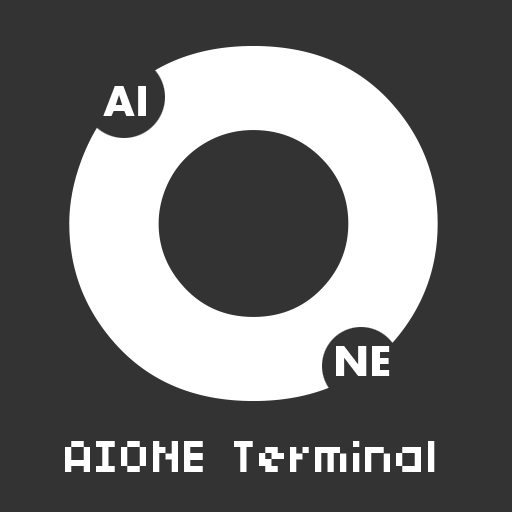
<style>
.page{position:relative;width:512px;height:512px;background:#333333}
.page>*{position:absolute;margin:0}
.t1{font:45px "AharoniBold";color:#ffffff}
.t2{font:50px "04b03";color:#ffffff}
</style>
<div class="page">
<p class="t1" style="left:103px;top:86px;width:43px;height:30px">AI</p>
<p class="t1" style="left:336px;top:346px;width:54px;height:30px">NE</p>
<p class="t2" style="left:65px;top:441px;width:370px;height:31px">AIONE Terminal</p>
</div>
